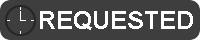
<style>
.page{position:relative;width:200px;height:40px;background:#3e3e3e}
.page>*{position:absolute;margin:0}
.t1{font:25px "Arial-BoldMT";color:#ffffff}
</style>
<div class="page">
<p class="t1" style="left:40px;top:11px;width:153px;height:19px">REQUESTED</p>
</div>
